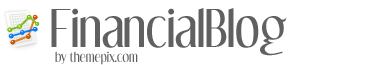
<style>
.page{position:relative;width:389px;height:65px;background:#ffffff}
.page>*{position:absolute;margin:0}
.t1{font:45px "DreamOrphans-Regular";color:#616060}
.t2{font:12px "DreamOrphans-Regular";color:#616060}
</style>
<div class="page">
<p class="t1" style="left:51px;top:8px;width:236px;height:48px">FinancialBlog</p>
<p class="t2" style="left:55px;top:51px;width:83px;height:14px">by themepix.com</p>
</div>
